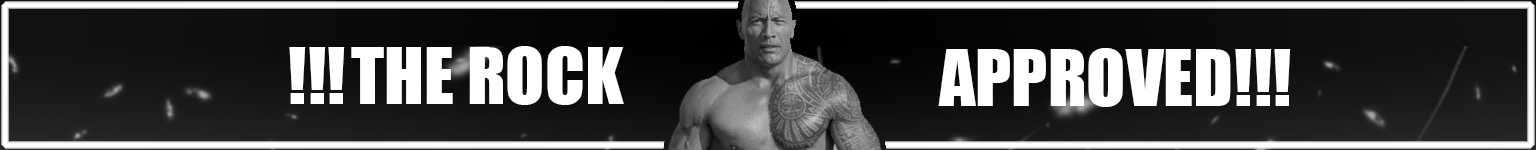
<style>
.page{position:relative;width:1536px;height:150px}
.page>*{position:absolute;margin:0}
.t1{font:72px "Impact";color:#ffffff}
</style>
<div class="page">
<p class="t1" style="left:289px;top:47px;width:56px;height:57px">!!!</p>
<p class="t1" style="left:351px;top:46px;width:273px;height:59px">THE ROCK</p>
<p class="t1" style="left:938px;top:48px;width:293px;height:59px">APPROVED</p>
<p class="t1" style="left:1235px;top:49px;width:56px;height:57px">!!!</p>
</div>
